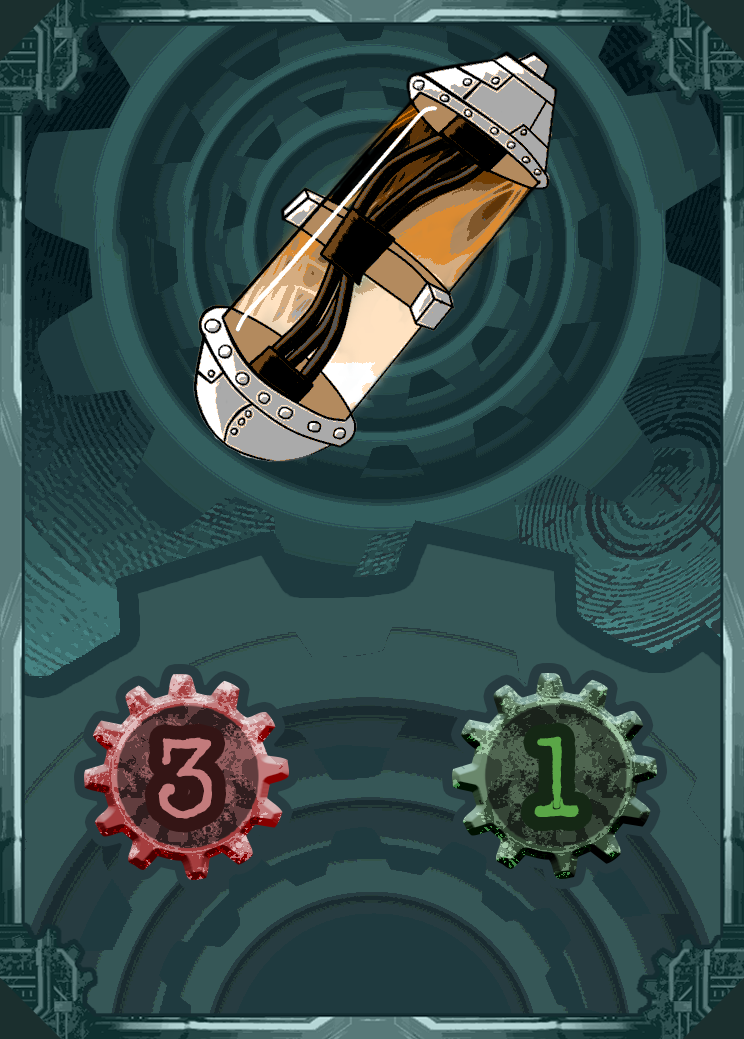
<style>
.page{position:relative;width:744px;height:1039px}
.page>*{position:absolute;margin:0}
.t1{font:121.5px "AmerTypewriterITCbyBT-Medium";color:#c37b7c}
.t2{font:121.5px "AmerTypewriterITCbyBT-Medium";color:#5aa647}
</style>
<div class="page">
<p class="t1" style="left:158px;top:737px;width:54px;height:82px">3</p>
<p class="t2" style="left:534px;top:736px;width:45px;height:81px">1</p>
</div>
